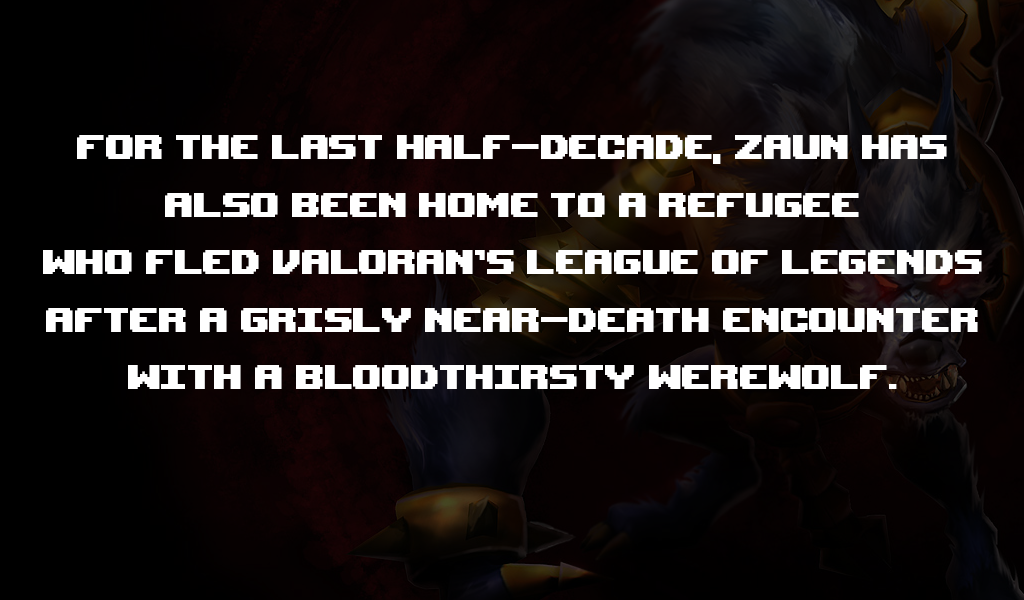
<style>
.page{position:relative;width:1024px;height:600px}
.page>*{position:absolute;margin:0}
.t1{font:48px "UpheavalPro-Regular";color:#ffffff}
</style>
<div class="page">
<p class="t1" style="left:43px;top:135px;width:939px;height:254px;text-align:center">For the last half-decade, zaun has<br>also been home to a refugee<br>who fled valoran’s League of Legends<br>after a grisly near-death encounter<br>with a bloodthirsty werewolf.</p>
</div>
